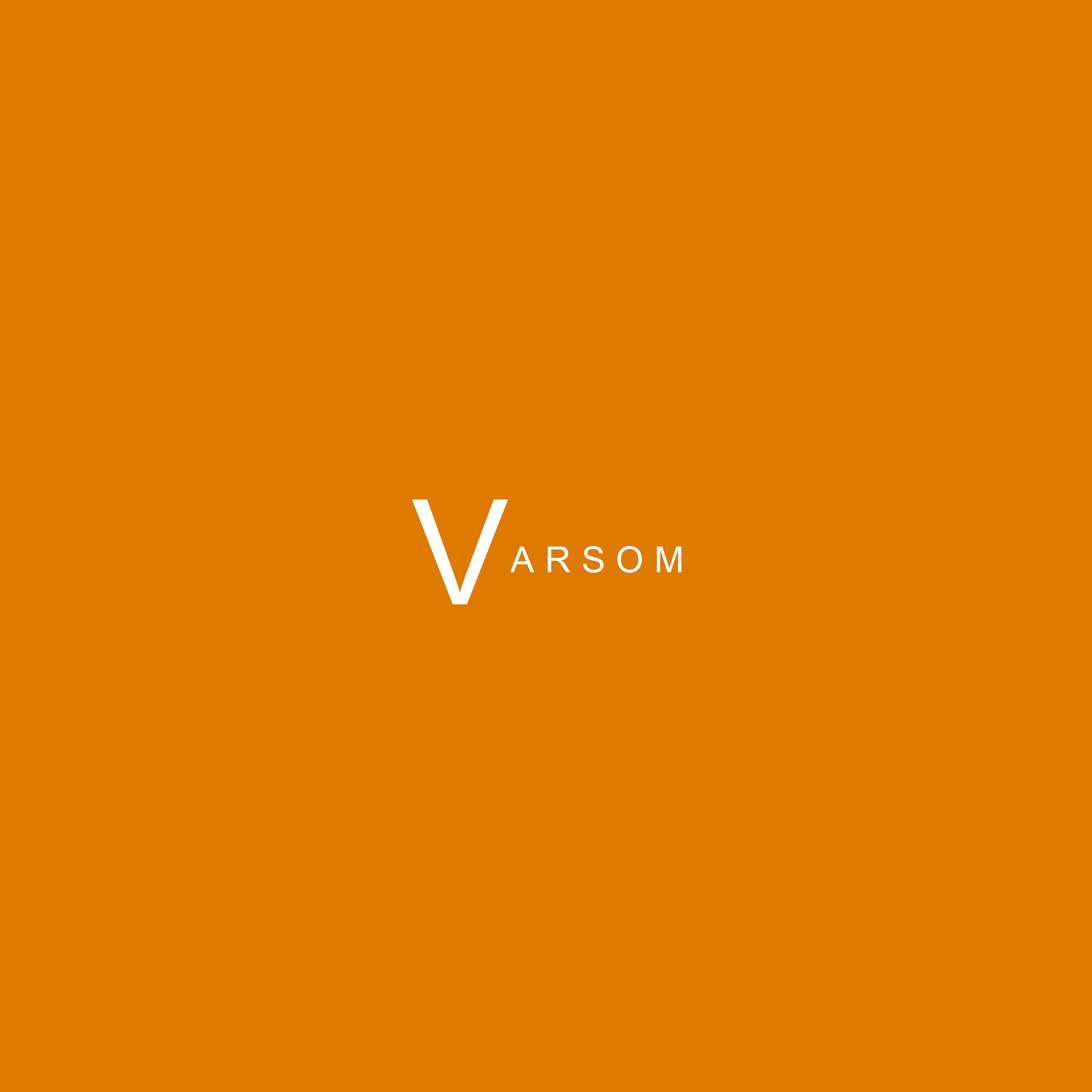
<style>
.page{position:relative;width:1092px;height:1092px;background:#df7a00}
.page>*{position:absolute;margin:0}
.t1{font:146.6px "ArialMT";letter-spacing:0.3em;color:#ffffff;text-transform:uppercase}
.t2{font:35.6px "ArialMT";letter-spacing:0.3em;color:#ffffff;text-transform:uppercase}
</style>
<div class="page">
<p class="t1" style="left:412px;top:500px;width:96px;height:104px">V</p>
<p class="t2" style="left:510px;top:546px;width:172px;height:27px">ARSOM</p>
</div>
